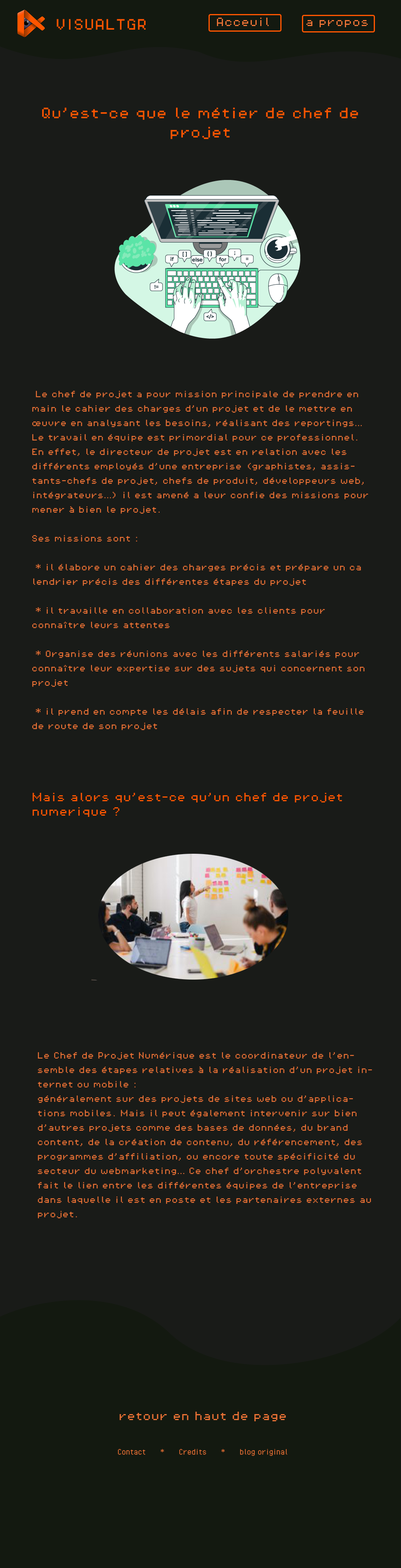
<style>
.page{position:relative;width:401px;height:1568px;background:#191b18}
.page>*{position:absolute;margin:0}
.t1{font:9.6px "PixelOperator8";color:#ea7235}
.t2{font:12px "PixelOperator8";color:#ff5600}
.t3{font:12px/19.2px "PixelOperator8";color:#ff5600}
.t4{font:7.2px/14.4px "PixelOperator8";color:#ea7235}
.t5{font:9.6px/14.4px "PixelOperator8";color:#ff5600}
.t6{font:9.6px "PixelOperator";color:#ea7235}
</style>
<div class="page">
<p class="t1" style="left:217px;top:18px;width:52px;height:8px">Acceuil</p>
<p class="t2" style="left:57px;top:19px;width:88px;height:11px">VISUALTGR</p>
<p class="t1" style="left:306px;top:20px;width:62px;height:7px">a propos</p>
<p class="t3" style="left:42px;top:107px;width:316px;height:32px;text-align:center">Qu’est-ce que le métier de chef de projet</p>
<p class="t4" style="left:32px;top:391px;width:336px;height:426px">Le chef de projet a pour mission principale de prendre en main le cahier des charges d’un projet et de le mettre en œuvre en analysant les besoins, réalisant des reportings… Le travail en équipe est primordial pour ce professionnel. En effet, le directeur de projet est en relation avec les différents employés d’une entreprise (graphistes, assistants-chefs de projet, chefs de produit, développeurs web, intégrateurs…) il est amené a leur confie des missions pour mener à bien le projet.<br><br>Ses missions sont :<br><br> * il élabore un cahier des charges précis et prépare un ca            lendrier précis des différentes étapes du projet<br><br> * il travaille en collaboration avec les clients pour connaître leurs attentes<br><br> * Organise des réunions avec les différents salariés pour connaître leur expertise sur des sujets qui concernent son projet<br><br> * il prend en compte les délais afin de respecter la feuille de route de son projet<br><br><br><br><br><span class="t5">Mais alors qu’est-ce qu’un chef de projet numerique ?</span></p>
<p class="t4" style="left:38px;top:1052px;width:334px;height:166px">Le Chef de Projet Numérique est le coordinateur de l’ensemble des étapes relatives à la réalisation d’un projet internet ou mobile :<br>généralement sur des projets de sites web ou d’applications mobiles. Mais il peut également intervenir sur bien d’autres projets comme des bases de données, du brand content, de la création de contenu, du référencement, des programmes d’affiliation, ou encore toute spécificité du secteur du webmarketing… Ce chef d’orchestre polyvalent fait le lien entre les différentes équipes de l’entreprise dans laquelle il est en poste et les partenaires externes au projet.</p>
<p class="t6" style="left:118px;top:1412px;width:169px;height:44px;text-align:center"><span class="t1">retour en haut de page<br><br><br></span>Contact      *      Credits      *      blog original</p>
</div>
